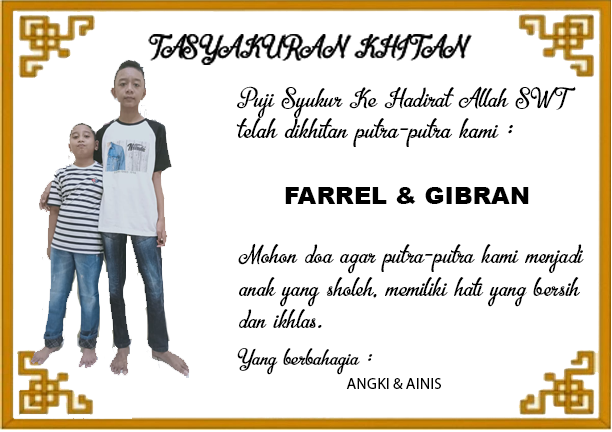
<style>
.page{position:relative;width:612px;height:432px;background:#ffffff}
.page>*{position:absolute;margin:0}
.t1{font:28.5px "Bellico";color:#000000}
.t2{font:28.7px "Bellico";color:#000000}
.t3{font:24px "Arial-Black";color:#000000}
.t4{font:27.2px "Bellico";color:#000000}
.t5{font:24px "Bellico";color:#000000}
.t6{font:16px "MyriadPro-Regular";color:#000000}
</style>
<div class="page">
<p class="t1" style="left:237px;top:86px;width:339px;height:32px">Puji Syukur Ke Hadirat Allah SWT</p>
<p class="t2" style="left:236px;top:118px;width:277px;height:29px">telah dikhitan putra-putra kami :</p>
<p class="t3" style="left:285px;top:187px;width:244px;height:17px">FARREL &amp; GIBRAN</p>
<p class="t4" style="left:238px;top:243px;width:346px;height:85px">Mohon doa agar putra-putra kami menjadi<br>anak yang sholeh, memiliki hati yang bersih<br>dan ikhlas.</p>
<p class="t5" style="left:237px;top:348px;width:136px;height:27px">Yang berbahagia :</p>
<p class="t6" style="left:346px;top:378px;width:95px;height:11px">ANGKI &amp; AINIS</p>
</div>
